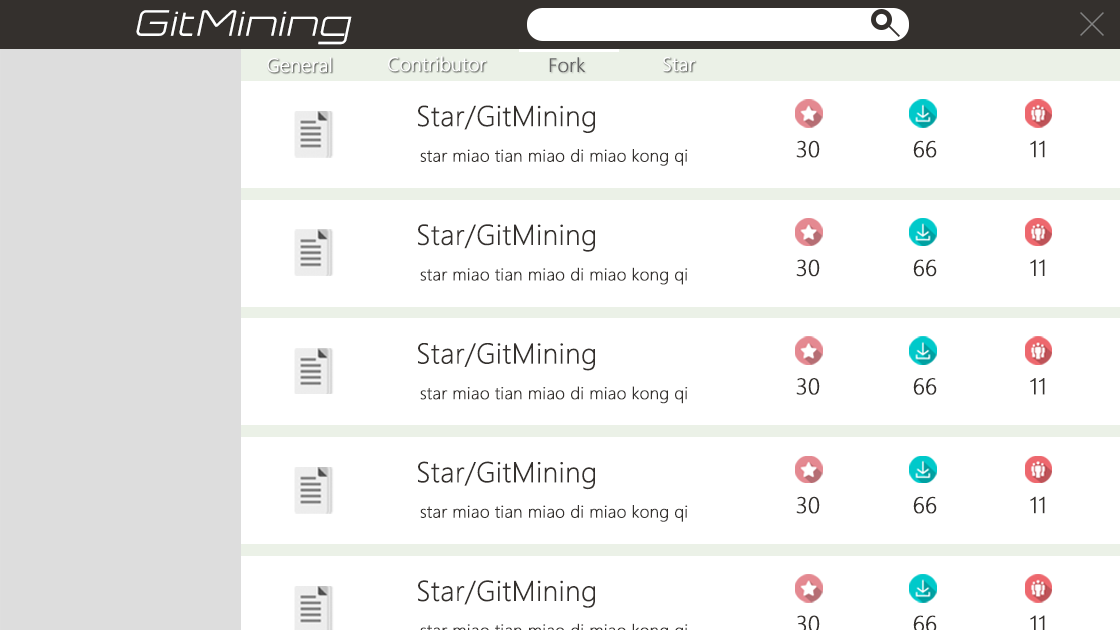
<style>
.page{position:relative;width:1120px;height:630px;background:#ffffff}
.page>*{position:absolute;margin:0}
.t1{font:35.2px "Expansiva-Italic";color:#ffffff;font-weight:bold}
.t2{font:18px "MicrosoftYaHeiLight";color:#ffffff;font-weight:bold}
.t3{font:18px "MicrosoftYaHeiLight";color:#646464;font-weight:bold}
.t4{font:26.4px "MicrosoftYaHeiLight";color:#34302d;font-weight:bold}
.t5{font:15.8px "MicrosoftYaHeiLight";color:#34302d;font-weight:bold}
.t6{font:21.1px "MicrosoftYaHeiLight";color:#34302d;font-weight:bold}
</style>
<div class="page">
<p class="t1" style="left:136px;top:10px;width:216px;height:35px">GitMining</p>
<p class="t2" style="left:267px;top:57px;width:65px;height:16px">General</p>
<p class="t2" style="left:388px;top:56px;width:98px;height:16px">Contributor</p>
<p class="t3" style="left:549px;top:57px;width:36px;height:16px">Fork</p>
<p class="t2" style="left:663px;top:57px;width:32px;height:15px">Star</p>
<p class="t4" style="left:418px;top:105px;width:177px;height:28px">Star/GitMining</p>
<p class="t5" style="left:420px;top:149px;width:268px;height:17px">star miao tian miao di miao kong qi</p>
<p class="t6" style="left:796px;top:140px;width:24px;height:18px">30</p>
<p class="t6" style="left:913px;top:140px;width:24px;height:18px">66</p>
<p class="t6" style="left:1030px;top:140px;width:15px;height:18px">11</p>
<p class="t4" style="left:418px;top:224px;width:177px;height:28px">Star/GitMining</p>
<p class="t5" style="left:420px;top:267px;width:268px;height:18px">star miao tian miao di miao kong qi</p>
<p class="t6" style="left:796px;top:259px;width:24px;height:18px">30</p>
<p class="t6" style="left:913px;top:259px;width:24px;height:18px">66</p>
<p class="t6" style="left:1030px;top:259px;width:15px;height:17px">11</p>
<p class="t4" style="left:418px;top:343px;width:177px;height:28px">Star/GitMining</p>
<p class="t5" style="left:420px;top:386px;width:268px;height:18px">star miao tian miao di miao kong qi</p>
<p class="t6" style="left:796px;top:378px;width:24px;height:17px">30</p>
<p class="t6" style="left:913px;top:378px;width:24px;height:17px">66</p>
<p class="t6" style="left:1030px;top:378px;width:15px;height:17px">11</p>
<p class="t4" style="left:418px;top:461px;width:177px;height:29px">Star/GitMining</p>
<p class="t6" style="left:796px;top:496px;width:24px;height:18px">30</p>
<p class="t6" style="left:913px;top:496px;width:24px;height:18px">66</p>
<p class="t6" style="left:1030px;top:496px;width:15px;height:18px">11</p>
<p class="t5" style="left:420px;top:505px;width:268px;height:17px">star miao tian miao di miao kong qi</p>
<p class="t4" style="left:418px;top:580px;width:177px;height:28px">Star/GitMining</p>
<p class="t6" style="left:1030px;top:615px;width:15px;height:17px">11</p>
</div>
